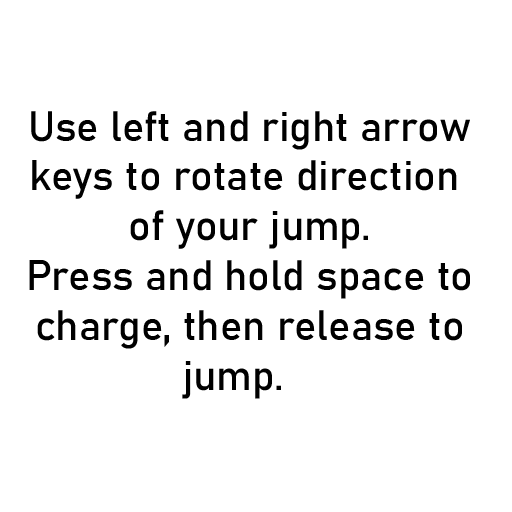
<style>
.page{position:relative;width:512px;height:512px;background:#ffffff}
.page>*{position:absolute;margin:0}
.t1{font:41.7px "Bahnschrift";color:#000000}
</style>
<div class="page">
<p class="t1" style="left:29px;top:111px;width:441px;height:288px;text-align:center">Use left and right arrow<br>keys to rotate direction <br>of your jump.<br>Press and hold space to<br>charge, then release to<br>jump.</p>
</div>
